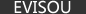
<style>
.page{position:relative;width:86px;height:14px;background:#333333}
.page>*{position:absolute;margin:0}
.t1{font:16px "MicrosoftYaHei";color:#ffffff}
</style>
<div class="page">
<p class="t1" style="left:14px;top:0px;width:57px;height:14px">EVISOU</p>
</div>
